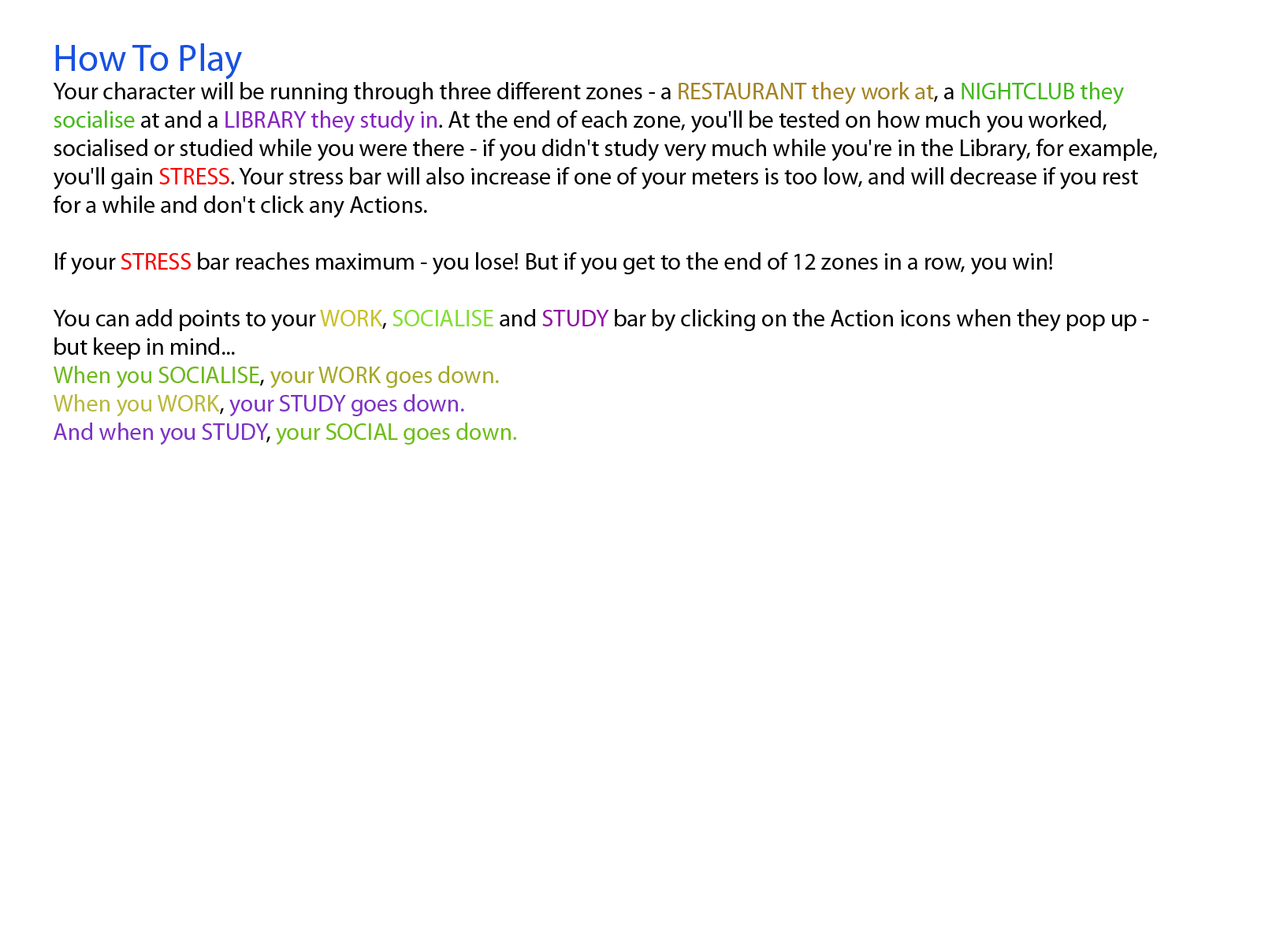
<style>
.page{position:relative;width:1261px;height:946px;background:#ffffff}
.page>*{position:absolute;margin:0}
.t1{font:23.6px "MyriadPro-Regular";color:#000000}
.t2{font:37.8px "MyriadPro-Regular";color:#1851e1}
.t3{font:23.6px "MyriadPro-Regular";color:#a48225}
.t4{font:23.6px "MyriadPro-Regular";color:#44b91b}
.t5{font:23.6px "MyriadPro-Regular";color:#8725c0}
.t6{font:23.6px "MyriadPro-Regular";color:#fc0505}
.t7{font:23.6px "MyriadPro-Regular";color:#f60606}
.t8{font:23.6px "MyriadPro-Regular";color:#c9c028}
.t9{font:23.6px "MyriadPro-Regular";color:#84de34}
.t10{font:23.6px "MyriadPro-Regular";color:#9115a0}
.t11{font:23.6px "MyriadPro-Regular";color:#6db81c}
.t12{font:23.6px "MyriadPro-Regular";color:#a6a729}
.t13{font:23.6px "MyriadPro-Regular";color:#b9b83a}
.t14{font:23.6px "MyriadPro-Regular";color:#7d32c3}
.t15{font:23.6px "MyriadPro-Regular";color:#6dbe16}
</style>
<div class="page">
<p class="t1" style="left:53px;top:43px;width:1104px;height:402px"><span class="t2">How To Play<br></span>Your character will be running through three different zones - a <span class="t3">RESTAURANT they work at</span>, a <span class="t4">NIGHTCLUB they   socialise</span> at and a <span class="t5">LIBRARY they study in</span>. At the end of each zone, you'll be tested on how much you worked,       socialised or studied while you were there - if you didn't study very much while you're in the Library, for example, you'll gain <span class="t6">STRESS</span>. Your stress bar will also increase if one of your meters is too low, and will decrease if you rest for a while and don't click any Actions.<br><br>If your <span class="t7">STRESS </span>bar reaches maximum - you lose! But if you get to the end of 12 zones in a row, you win!<br><br>You can add points to your <span class="t8">WORK</span>, <span class="t9">SOCIALISE </span>and <span class="t10">STUDY </span>bar by clicking on the Action icons when they pop up - but keep in mind...<br><span class="t11">When you SOCIALISE</span>, <span class="t12">your WORK goes down.<br></span><span class="t13">When you WORK</span>, <span class="t14">your STUDY goes down.<br>And when you STUDY</span>, <span class="t15">your SOCIAL goes down.</span></p>
</div>
